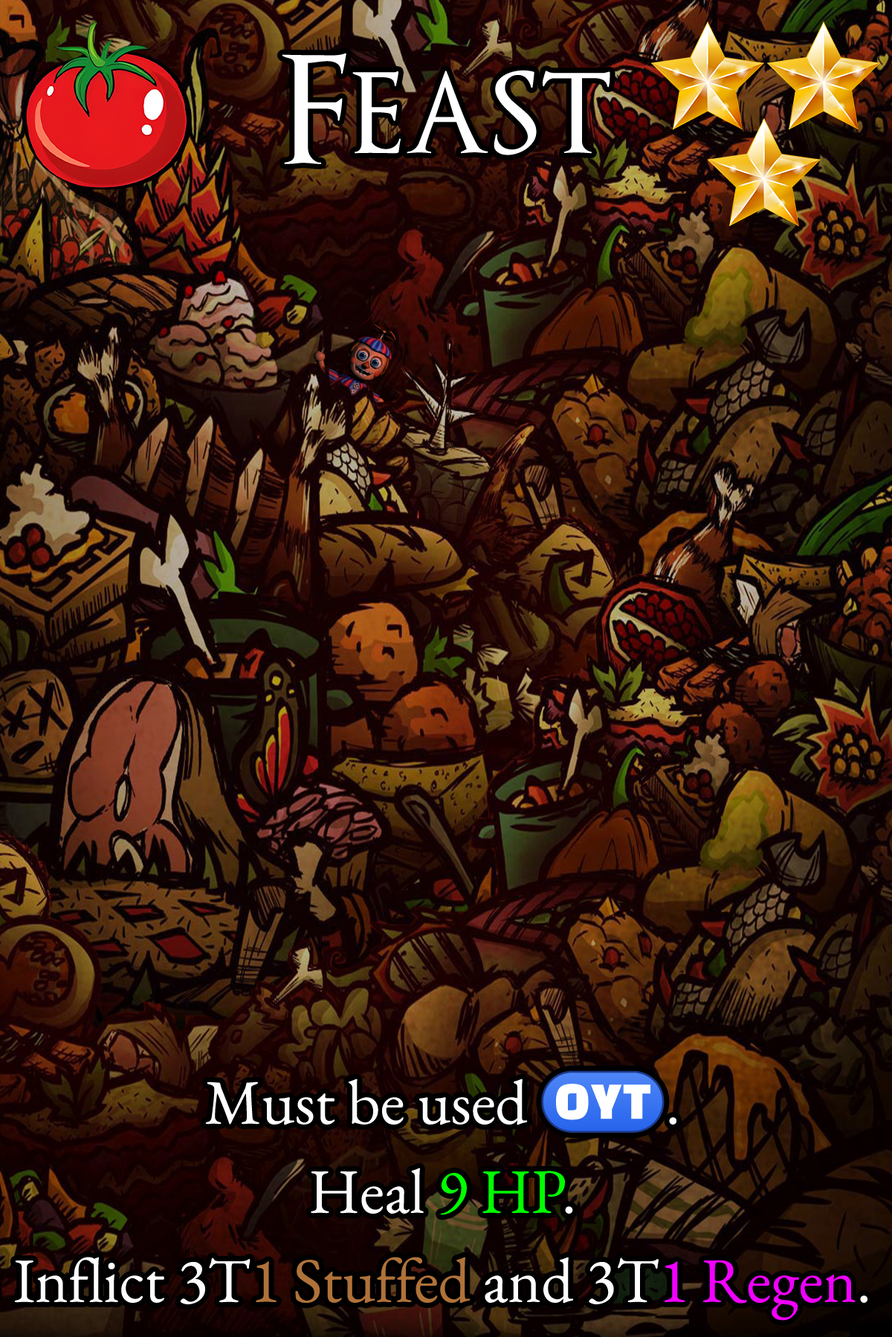
<style>
.page{position:relative;width:892px;height:1337px}
.page>*{position:absolute;margin:0}
.t1{font:251.9px "OptimusPrinceps";color:#ffffff}
.t2{font:63.2px/89.2px "EBGaramond-Regular";color:#ffffff}
.t3{font:63.2px/89.2px "stoogedings-Regular";color:#ffffff}
.t4{font:63.2px/89.2px "EBGaramond-Regular";color:#00ff00}
.t5{font:63.2px/89.2px "EBGaramond-Regular";color:#b07239}
.t6{font:63.2px/89.2px "EBGaramond-Regular";color:#f000ff}
</style>
<div class="page">
<p class="t1" style="left:282px;top:53px;width:328px;height:111px">Feast</p>
<p class="t2" style="left:14px;top:1071px;width:853px;height:250px;text-align:center">Must be used <span class="t3">(OYT)</span>.<br>Heal <span class="t4">9 HP</span>.<br>Inflict 3T<span class="t5">1 Stuffed</span> and 3T<span class="t6">1 Regen</span>.</p>
</div>
